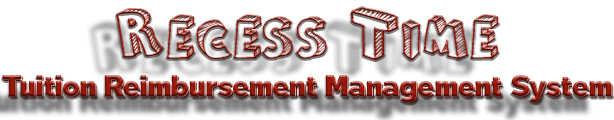
<style>
.page{position:relative;width:614px;height:120px;background:#ffffff}
.page>*{position:absolute;margin:0}
.t1{font:80px "FromCartoonBlocks"}
.t2{font:27px "TabarraShadow"}
</style>
<div class="page">
<p class="t1" style="left:116px;top:6px;width:383px;height:55px">Recess Time</p>
<p class="t2" style="left:2px;top:75px;width:611px;height:29px">Tuition Reimbursement Management System</p>
</div>
